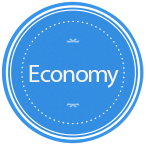
<style>
.page{position:relative;width:146px;height:145px;background:#ffffff}
.page>*{position:absolute;margin:0}
.t1{font:25px "MyriadPro-Regular";letter-spacing:-0.04em;color:#f5f5f5}
</style>
<div class="page">
<p class="t1" style="left:29px;top:65px;width:90px;height:23px">Economy</p>
</div>
